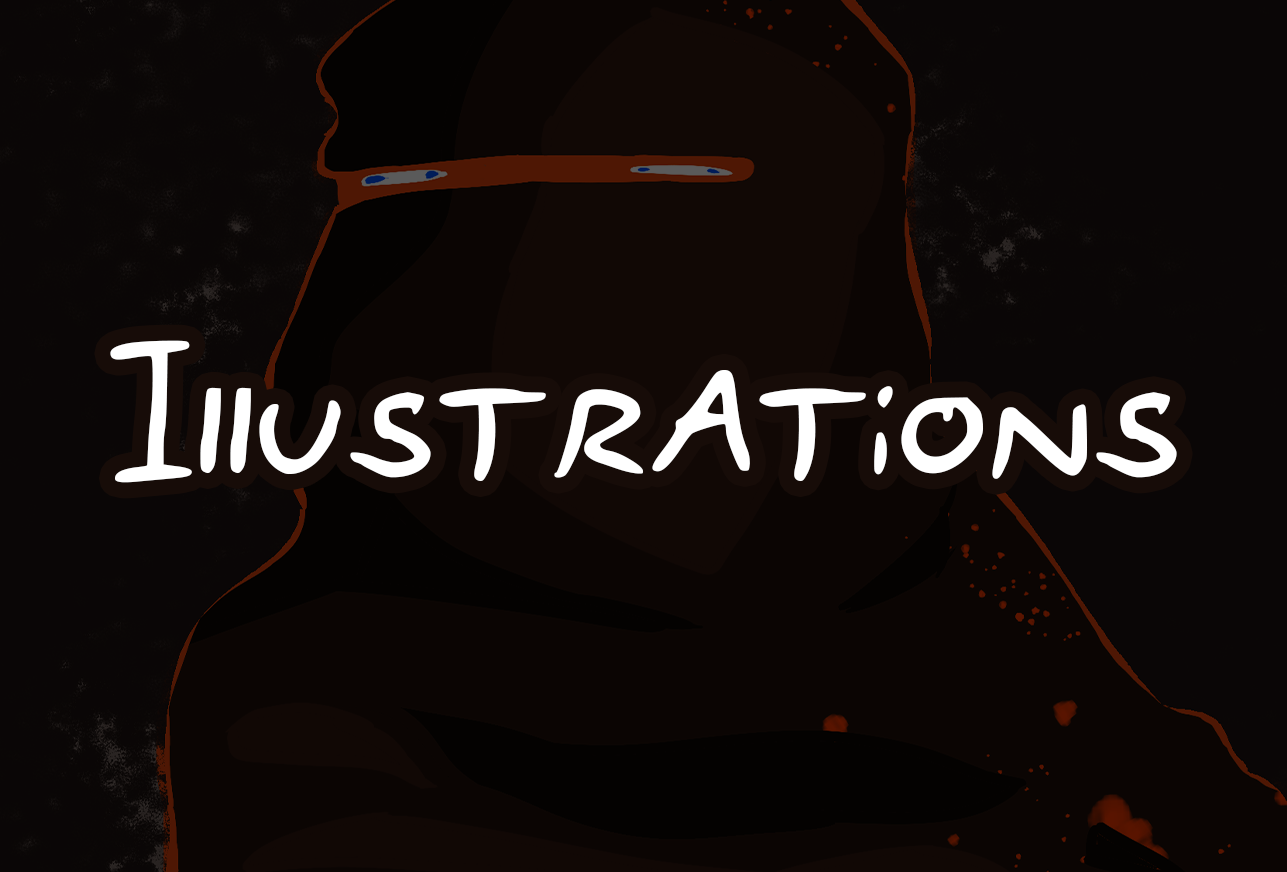
<style>
.page{position:relative;width:1287px;height:872px;background:#0a0606}
.page>*{position:absolute;margin:0}
.t1{font:250px "Floris-Regular";color:#ffffff}
</style>
<div class="page">
<p class="t1" style="left:110px;top:340px;width:1067px;height:143px">Illustrations</p>
</div>
